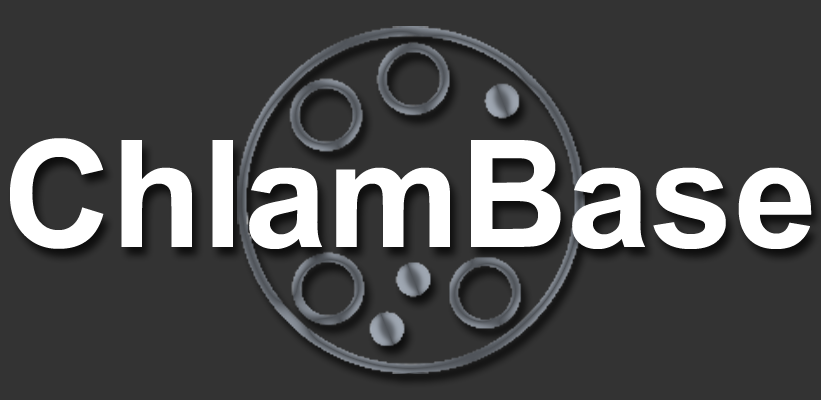
<style>
.page{position:relative;width:821px;height:400px;background:#333333}
.page>*{position:absolute;margin:0}
.t1{font:149.2px "Arial-BoldMT";color:#ffffff}
</style>
<div class="page">
<p class="t1" style="left:10px;top:138px;width:802px;height:111px">ChlamBase</p>
</div>
